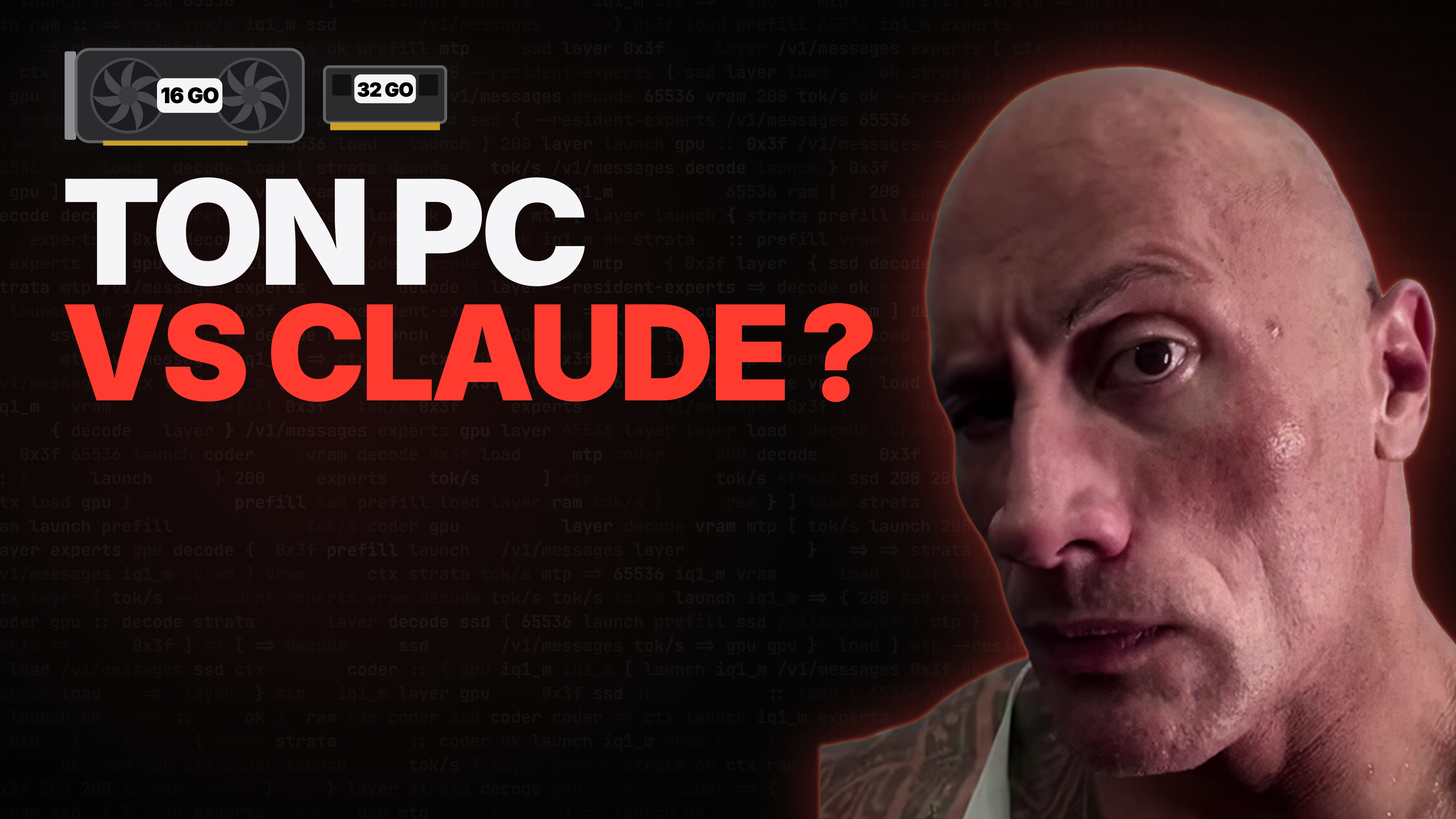
<style>
.page{position:relative;width:1456px;height:819px}
.page>*{position:absolute;margin:0}
.t1{font:145.6px "Inter-Black";letter-spacing:-0.035em;color:#f5f5f7}
.t2{font:131.9px "Inter-Black";letter-spacing:-0.035em;color:#ff3b30}
</style>
<div class="page">
<p class="t1" style="left:65px;top:177px;width:520px;height:110px">TON PC</p>
<p class="t2" style="left:64px;top:303px;width:809px;height:100px">VS CLAUDE ?</p>
</div>
